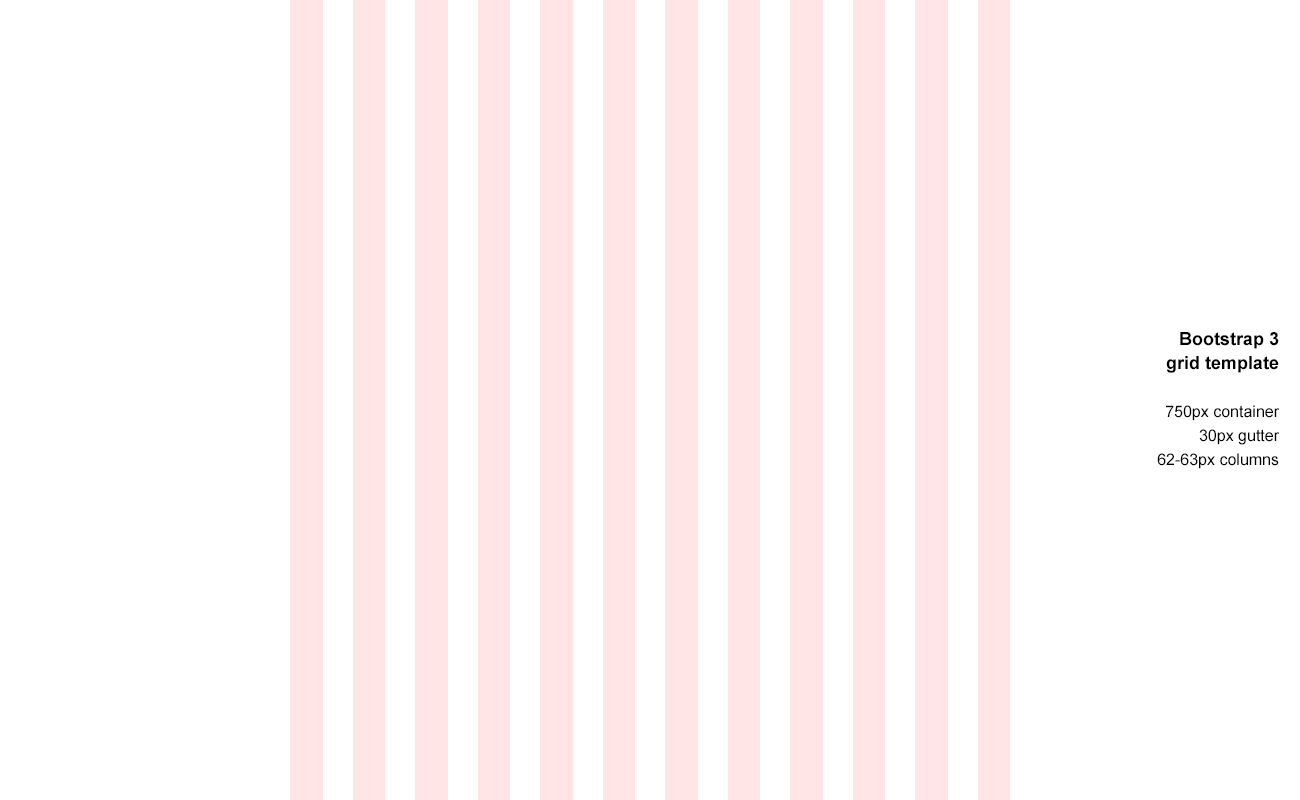
<style>
.page{position:relative;width:1300px;height:800px;background:#ffffff}
.page>*{position:absolute;margin:0}
.t1{font:16px/24px "ArialMT";color:#000000}
.t2{font:18px/24px "Arial-BoldMT";color:#000000}
</style>
<div class="page">
<p class="t1" style="left:1157px;top:332px;width:123px;height:137px;text-align:right"><span class="t2">Bootstrap 3<br>grid template<br><br></span>750px container<br>30px gutter<br>62-63px columns</p>
</div>
